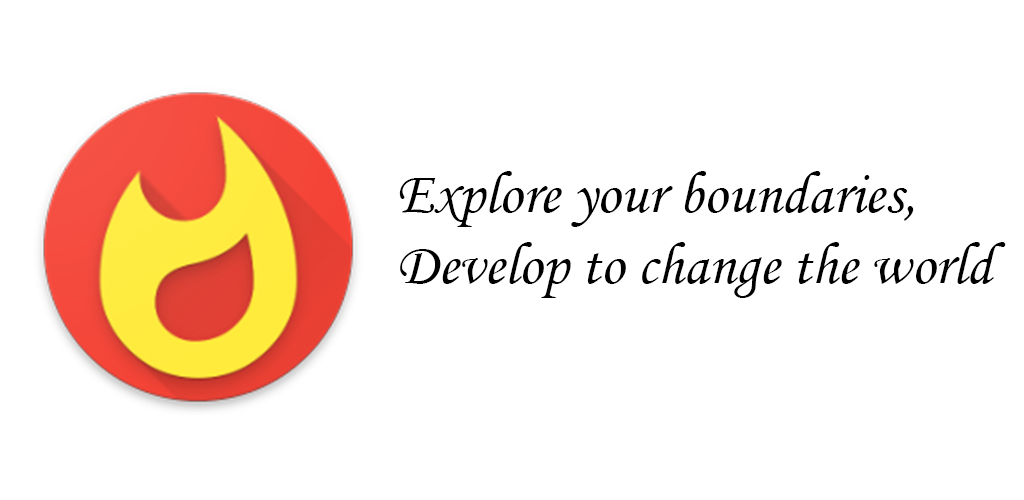
<style>
.page{position:relative;width:1024px;height:500px;background:#ffffff}
.page>*{position:absolute;margin:0}
.t1{font:59.3px "MonotypeCorsiva";color:#000000}
</style>
<div class="page">
<p class="t1" style="left:399px;top:171px;width:607px;height:127px">Explore your boundaries, <br>Develop to change the world</p>
</div>
